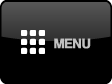
<style>
.page{position:relative;width:112px;height:84px;background:#000000}
.page>*{position:absolute;margin:0}
.t1{font:13px "Helvetica-Bold";letter-spacing:-0.05em;color:#c1c1c1;font-weight:bold}
</style>
<div class="page">
<p class="t1" style="left:54px;top:38px;width:37px;height:11px">MENU</p>
</div>
